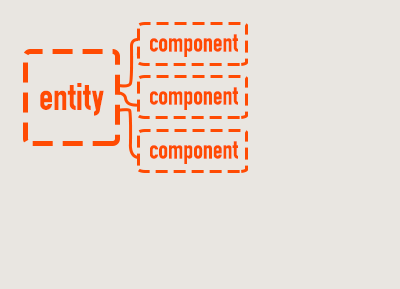
<style>
.page{position:relative;width:400px;height:289px;background:#e9e6e1}
.page>*{position:absolute;margin:0}
.t1{font:26.6px "OSP-DIN";color:#ff4b03}
.t2{font:38.1px "OSP-DIN";color:#ff4b03}
</style>
<div class="page">
<p class="t1" style="left:150px;top:34px;width:88px;height:23px">component</p>
<p class="t2" style="left:40px;top:83px;width:64px;height:33px">entity</p>
<p class="t1" style="left:150px;top:87px;width:88px;height:23px">component</p>
<p class="t1" style="left:150px;top:141px;width:88px;height:23px">component</p>
</div>
